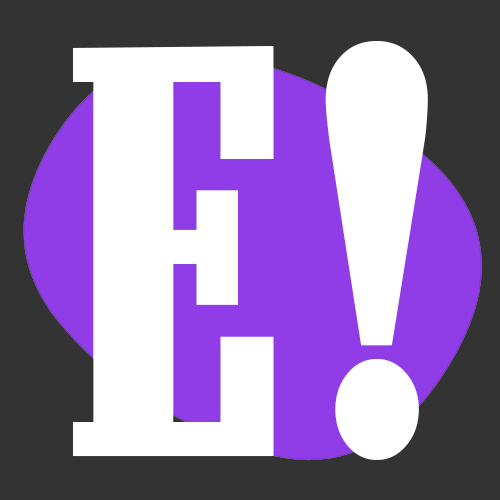
<style>
.page{position:relative;width:500px;height:500px;background:#333333}
.page>*{position:absolute;margin:0}
.t1{font:600px "Marlboro";color:#ffffff}
</style>
<div class="page">
<p class="t1" style="left:73px;top:40px;width:355px;height:420px">E!</p>
</div>
